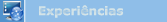
<style>
.page{position:relative;width:167px;height:22px;background:#8fbee8}
.page>*{position:absolute;margin:0}
.t1{font:12px "Verdana-Bold";color:#d1e2e8}
</style>
<div class="page">
<p class="t1" style="left:39px;top:5px;width:85px;height:13px">Experiências</p>
</div>
